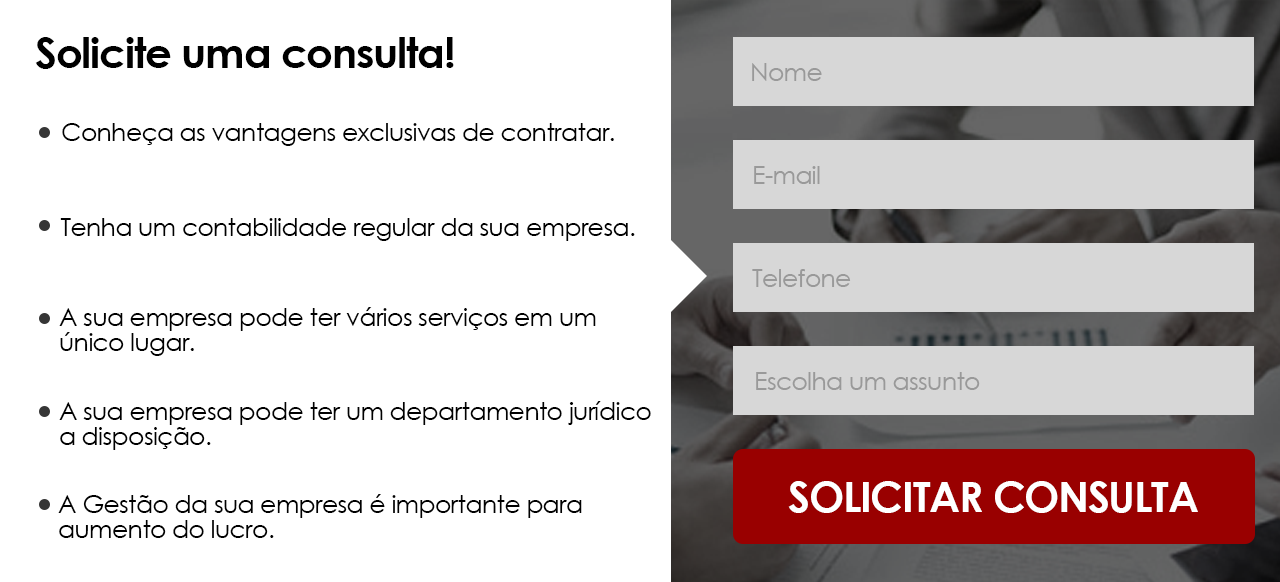
<style>
.page{position:relative;width:1280px;height:582px;background:#ffffff}
.page>*{position:absolute;margin:0}
.t1{font:41.7px "CenturyGothic-Bold";letter-spacing:-0.025em;color:#000000}
.t2{font:25px "CenturyGothic";letter-spacing:-0.025em;color:#999999}
.t3{font:25px "CenturyGothic";letter-spacing:-0.025em;color:#000000}
.t4{font:25px/25px "CenturyGothic";letter-spacing:-0.025em;color:#000000}
.t5{font:41.7px "CenturyGothic-Bold";letter-spacing:-0.025em;color:#ffffff}
</style>
<div class="page">
<p class="t1" style="left:35px;top:37px;width:419px;height:32px">Solicite uma consulta!</p>
<p class="t2" style="left:752px;top:63px;width:70px;height:18px">Nome</p>
<p class="t3" style="left:62px;top:123px;width:552px;height:23px">Conheça as vantagens exclusivas de contratar. a Ciatos Contabilidade</p>
<p class="t2" style="left:754px;top:166px;width:66px;height:18px">E-mail</p>
<p class="t3" style="left:60px;top:218px;width:575px;height:23px">Tenha um contabilidade regular da sua empresa.</p>
<p class="t2" style="left:752px;top:269px;width:99px;height:18px">Telefone</p>
<p class="t4" style="left:59px;top:307px;width:537px;height:49px">A sua empresa pode ter vários serviços em um <br>único lugar.</p>
<p class="t2" style="left:756px;top:372px;width:224px;height:18px">Escolha um assunto</p>
<p class="t4" style="left:59px;top:401px;width:592px;height:49px">A sua empresa pode ter um departamento jurídico<br>a disposição.</p>
<p class="t5" style="left:788px;top:481px;width:410px;height:32px">SOLICITAR CONSULTA</p>
<p class="t4" style="left:58px;top:494px;width:524px;height:44px">A Gestão da sua empresa é importante para <br>aumento do lucro.</p>
</div>
